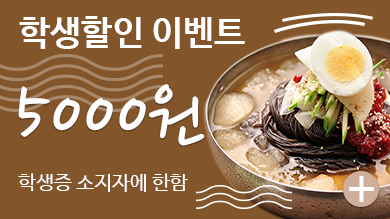
<style>
.page{position:relative;width:390px;height:219px;background:#82552a}
.page>*{position:absolute;margin:0}
.t1{font:35px "NanumBarunGothicBold";color:#ffffff}
.t2{font:91.3px "NanumPen";color:#ffffff}
.t3{font:20px "NanumBarunGothic";color:#ffffff}
.t4{font:52.5px "NanumBarunGothic";color:#ffffff}
</style>
<div class="page">
<p class="t1" style="left:19px;top:16px;width:226px;height:33px">학생할인 이벤트</p>
<p class="t2" style="left:18px;top:84px;width:187px;height:62px">5000원</p>
<p class="t3" style="left:18px;top:173px;width:170px;height:19px">학생증 소지자에 한함</p>
<p class="t4" style="left:349px;top:176px;width:25px;height:26px">+</p>
</div>
